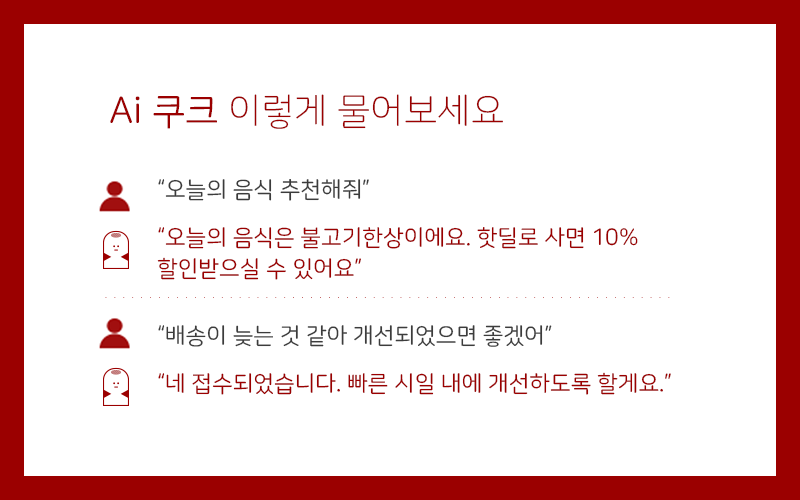
<style>
.page{position:relative;width:800px;height:500px;background:#ffffff}
.page>*{position:absolute;margin:0}
.t1{font:37px "NanumSquareRoundL";color:#9b0000}
.t2{font:37px "NanumSquareRoundR";color:#9b0000}
.t3{font:22.9px "NanumSquareRoundR";color:#3c3c3c}
.t4{font:22.9px/30.2px "NanumSquareRoundR";color:#9b0000}
.t5{font:22.9px "NanumSquareRoundR";color:#9b0000}
</style>
<div class="page">
<p class="t1" style="left:110px;top:94px;width:393px;height:35px"><span class="t2">Ai 쿠크</span> 이렇게 물어보세요</p>
<p class="t3" style="left:158px;top:179px;width:211px;height:22px">“오늘의 음식 추천해줘”</p>
<p class="t4" style="left:157px;top:227px;width:481px;height:53px">“오늘의 음식은 불고기한상이에요. 핫딜로 사면 10% <br>할인받으실 수 있어요”</p>
<p class="t3" style="left:158px;top:325px;width:394px;height:22px">“배송이 늦는 것 같아 개선되었으면 좋겠어”</p>
<p class="t5" style="left:158px;top:372px;width:513px;height:23px">“네 접수되었습니다. 빠른 시일 내에 개선하도록 할게요.”</p>
</div>
